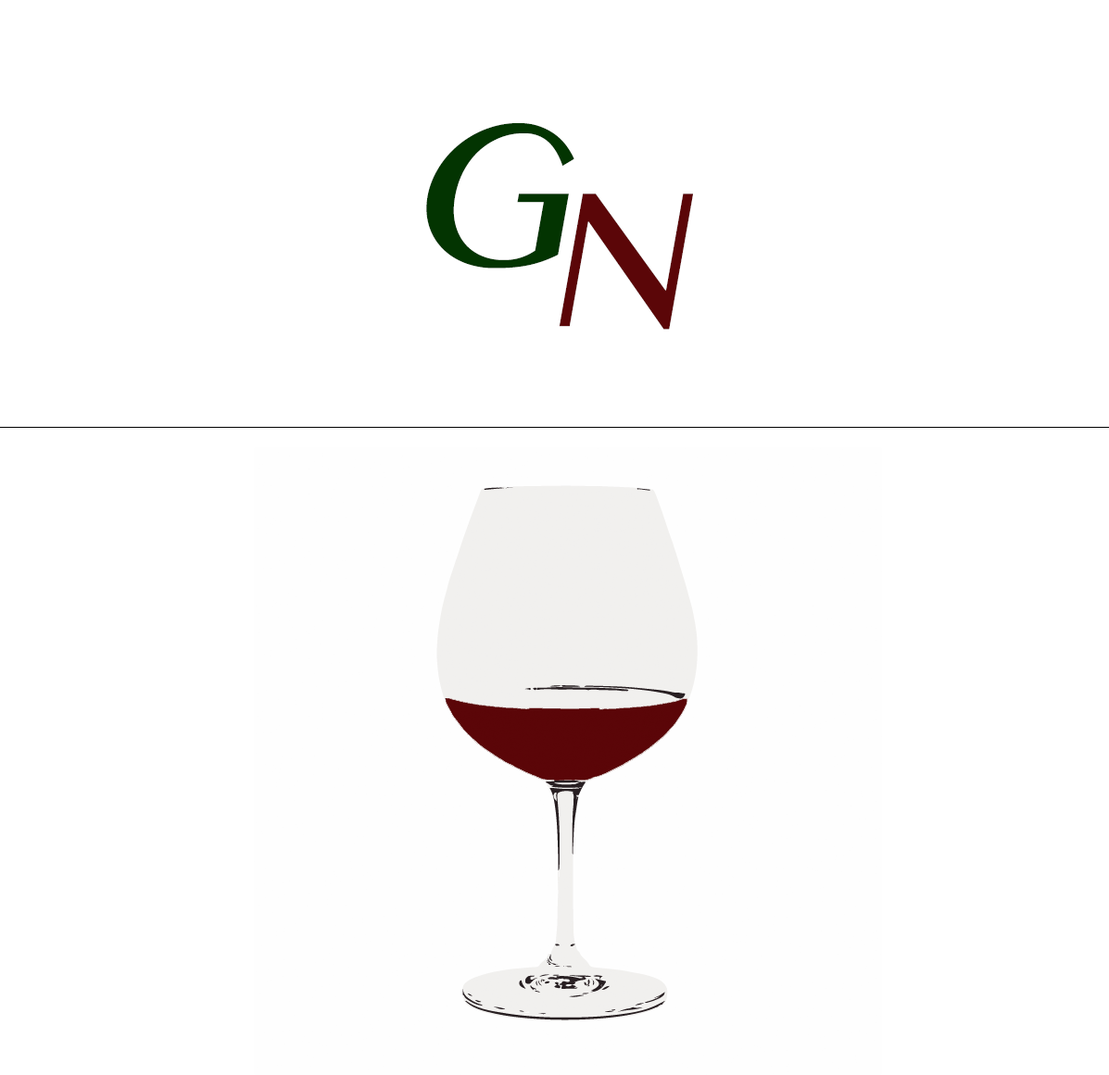
<style>
.page{position:relative;width:1109px;height:1075px;background:#ffffff}
.page>*{position:absolute;margin:0}
.t1{font:203.8px "MalayalamMN";color:#033401;font-style:italic}
.t2{font:194.5px "MalayalamMN";color:#5b0608;font-style:italic}
</style>
<div class="page">
<p class="t1" style="left:426px;top:123px;width:148px;height:146px">G</p>
<p class="t2" style="left:559px;top:194px;width:134px;height:136px">N</p>
</div>
